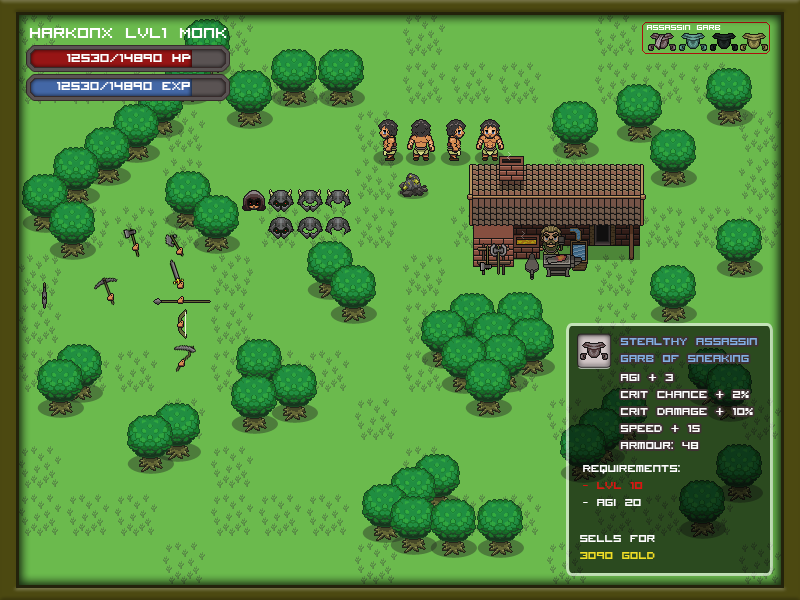
<style>
.page{position:relative;width:800px;height:600px;background:#6bba4d}
.page>*{position:absolute;margin:0}
.t1{font:20px "VisitorTT1BRK";color:#ffffff}
.t2{font:16px "VisitorTT1BRK";color:#ffffff}
.t3{font:14px "VisitorTT1BRK";color:#83b0e4}
.t4{font:14px "VisitorTT1BRK";color:#ffffff}
.t5{font:14px "VisitorTT1BRK";color:#de1111}
.t6{font:14px "VisitorTT1BRK";color:#f0df26}
</style>
<div class="page">
<p class="t1" style="left:29px;top:28px;width:198px;height:10px">Harkonx lvl1 Monk</p>
<p class="t2" style="left:66px;top:54px;width:125px;height:8px">12530/14890 HP</p>
<p class="t2" style="left:56px;top:82px;width:134px;height:8px">12530/14890 exp</p>
<p class="t3" style="left:620px;top:338px;width:137px;height:24px">Stealthy Assassin <br>Garb of Sneaking</p>
<p class="t4" style="left:620px;top:374px;width:133px;height:75px">agi + 3<br>crit chance + 2%<br>crit Damage + 10%<br>Speed + 15<br>Armour: 48</p>
<p class="t4" style="left:583px;top:465px;width:97px;height:41px">Requirements: <br><span class="t5">- Lvl 10<br></span>- agi 20</p>
<p class="t4" style="left:580px;top:535px;width:75px;height:24px">Sells for<br><span class="t6">3090 gold</span></p>
</div>
